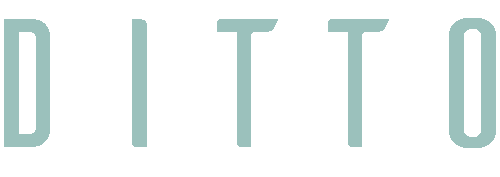
<style>
.page{position:relative;width:500px;height:177px;background:#ffffff}
.page>*{position:absolute;margin:0}
.t1{font:260.7px "Ailerons-Regular";color:#9bc1bc;font-variant:small-caps;scale:1.11 1}
</style>
<div class="page">
<p class="t1" style="left:4px;top:18px;width:492px;height:130px">ditto</p>
</div>
